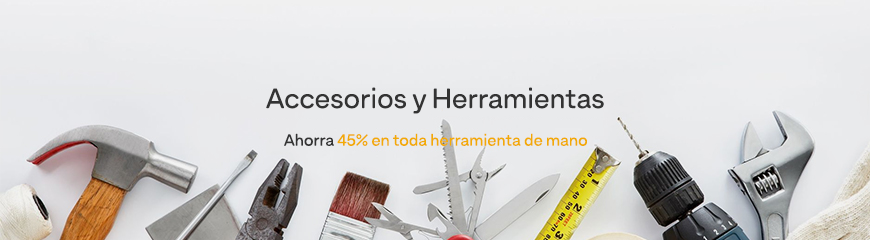
<style>
.page{position:relative;width:870px;height:240px}
.page>*{position:absolute;margin:0}
.t1{font:48px "ArminSoft-Regular";color:#333333}
.t2{font:28px "ArminSoft-Regular";color:#f2aa06}
.t3{font:28px "ArminSoft-Regular";color:#333333}
</style>
<div class="page">
<p class="t1" style="left:266px;top:87px;width:338px;height:27px">Accesorios y Herramientas</p>
<p class="t2" style="left:284px;top:133px;width:303px;height:13px"><span class="t3">Ahorra </span>45% en toda herramienta de mano</p>
</div>
